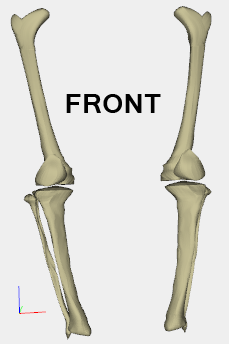
<style>
.page{position:relative;width:229px;height:344px;background:#efefef}
.page>*{position:absolute;margin:0}
.t1{font:30px "Raavi";color:#010101}
</style>
<div class="page">
<p class="t1" style="left:66px;top:94px;width:95px;height:19px">FRONT</p>
</div>
